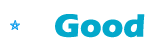
<style>
.page{position:relative;width:150px;height:50px;background:#ffffff}
.page>*{position:absolute;margin:0}
.t1{font:33.3px "ErasITC-Bold";color:#03a8cb}
</style>
<div class="page">
<p class="t1" style="left:55px;top:14px;width:90px;height:24px">Good</p>
</div>
